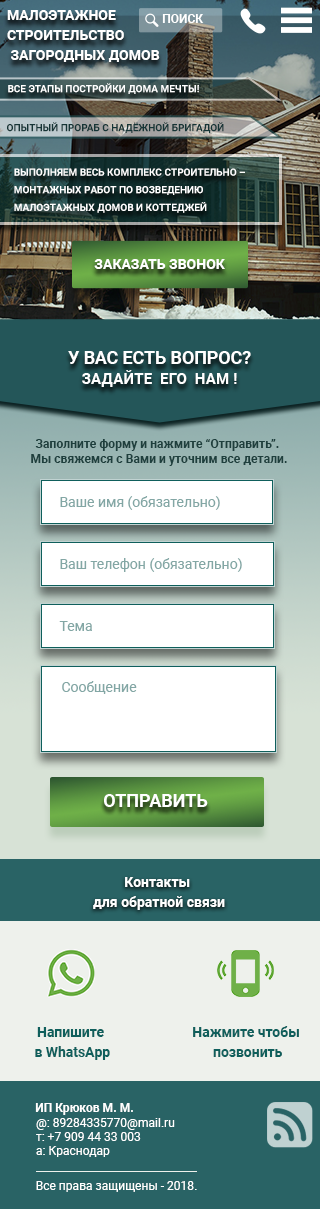
<style>
.page{position:relative;width:320px;height:1209px}
.page>*{position:absolute;margin:0}
.t1{font:14px/20px "Roboto-Bold";color:#ffffff}
.t2{font:12px "Roboto-Bold";color:#ffffff;text-transform:uppercase}
.t3{font:10px "Roboto-Bold";color:#ffffff;text-transform:uppercase}
.t4{font:10px "Roboto-Bold";color:#163536;text-transform:uppercase}
.t5{font:10px/17.6px "Roboto-Bold";color:#ffffff;text-transform:uppercase}
.t6{font:14px "Roboto-Bold";color:#ffffff;text-transform:uppercase}
.t7{font:15.2px/19.8px "Roboto-Bold";color:#ffffff}
.t8{font:17.6px/19.8px "Roboto-Bold";color:#ffffff}
.t9{font:12px/14.8px "Roboto-Bold";color:#1e3f3d}
.t10{font:14px "Roboto-Regular";color:#83a7a5}
.t11{font:18px "Roboto-Bold";color:#ffffff;text-transform:uppercase}
.t12{font:14.1px/20.1px "Roboto-Bold";color:#ffffff}
.t13{font:14px/20.1px "Roboto-Bold";color:#0f5f5c}
.t14{font:12px "Roboto-Bold";color:#ffffff}
.t15{font:12px/14.3px "Roboto-Regular";color:#ffffff}
.t16{font:12px "Roboto-Regular";color:#ffffff}
</style>
<div class="page">
<p class="t1" style="left:7px;top:10px;width:153px;height:52px">МАЛОЭТАЖНОЕ <br>СТРОИТЕЛЬСТВО<br> ЗАГОРОДНЫХ ДОМОВ</p>
<p class="t2" style="left:162px;top:14px;width:42px;height:9px">Поиск</p>
<p class="t3" style="left:8px;top:83px;width:191px;height:11px">Все этапы постройки дома мечты!</p>
<p class="t4" style="left:7px;top:122px;width:217px;height:11px">Опытный прораб с НАДЁЖНОЙ БРИГАДОЙ</p>
<p class="t5" style="left:14px;top:168px;width:231px;height:45px">Выполняем весь комплекс строительно –<br>монтажных работ по возведению <br>малоэтажных домов и коттеджей</p>
<p class="t6" style="left:94px;top:259px;width:131px;height:10px">заказать звонок</p>
<p class="t7" style="left:68px;top:351px;width:183px;height:36px;text-align:center"><span class="t8">У ВАС ЕСТЬ ВОПРОС?<br></span>ЗАДАЙТЕ  ЕГО  НАМ !</p>
<p class="t9" style="left:31px;top:439px;width:256px;height:27px;text-align:center">Заполните форму и нажмите “Отправить”. <br>Мы свяжемся с Вами и уточним все детали.</p>
<p class="t10" style="left:60px;top:496px;width:160px;height:14px">Ваше имя (обязательно)</p>
<p class="t10" style="left:60px;top:558px;width:182px;height:14px">Ваш телефон (обязательно)</p>
<p class="t10" style="left:59px;top:621px;width:33px;height:10px">Тема</p>
<p class="t10" style="left:62px;top:681px;width:75px;height:13px">Сообщение</p>
<p class="t11" style="left:104px;top:794px;width:104px;height:13px">ОТПРАВИТЬ</p>
<p class="t12" style="left:93px;top:877px;width:132px;height:33px;text-align:center">Контакты <br>для обратной связи</p>
<p class="t13" style="left:35px;top:1027px;width:75px;height:33px;text-align:center">Напишите<br> в WhatsApp</p>
<p class="t13" style="left:193px;top:1026px;width:106px;height:31px;text-align:center">Нажмите чтобы<br> позвонить</p>
<p class="t14" style="left:35px;top:1103px;width:98px;height:12px">ИП Крюков М. М.</p>
<p class="t15" style="left:36px;top:1118px;width:139px;height:39px">@: 89284335770@mail.ru<br>т: +7 909 44 33 003<br>а: Краснодар</p>
<p class="t16" style="left:36px;top:1181px;width:161px;height:11px">Все права защищены - 2018.</p>
</div>
